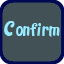
<style>
.page{position:relative;width:64px;height:64px;background:#425155}
.page>*{position:absolute;margin:0}
.t1{font:37.5px "FantasticFont";color:#97eaff}
</style>
<div class="page">
<p class="t1" style="left:4px;top:21px;width:56px;height:16px">Confirm</p>
</div>
